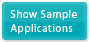
<style>
.page{position:relative;width:89px;height:42px;background:#19b1bc}
.page>*{position:absolute;margin:0}
.t1{font:11px/14px "MyriadPro-Regular";letter-spacing:0.04em;color:#fefefe}
</style>
<div class="page">
<p class="t1" style="left:10px;top:10px;width:67px;height:24px">Show Sample<br>Applications</p>
</div>
